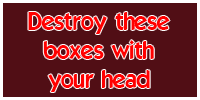
<style>
.page{position:relative;width:200px;height:100px;background:#510e15}
.page>*{position:absolute;margin:0}
.t1{font:24px "ELEGANCE";color:#ff0000}
</style>
<div class="page">
<p class="t1" style="left:28px;top:12px;width:142px;height:80px;text-align:center">Destroy these<br>boxes with<br>your head</p>
</div>
